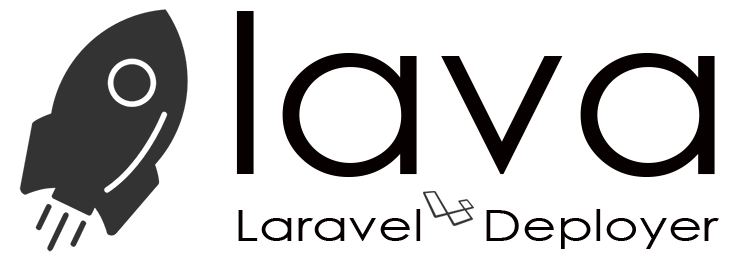
<style>
.page{position:relative;width:750px;height:260px;background:#ffffff}
.page>*{position:absolute;margin:0}
.t1{font:221.6px "CenturyGothic";color:#060000;scale:1.09 1}
.t2{font:43.5px "CenturyGothic";color:#060000;scale:1.23 1}
</style>
<div class="page">
<p class="t1" style="left:236px;top:11px;width:479px;height:166px">lava</p>
<p class="t2" style="left:238px;top:209px;width:481px;height:40px">Laravel    Deployer</p>
</div>
